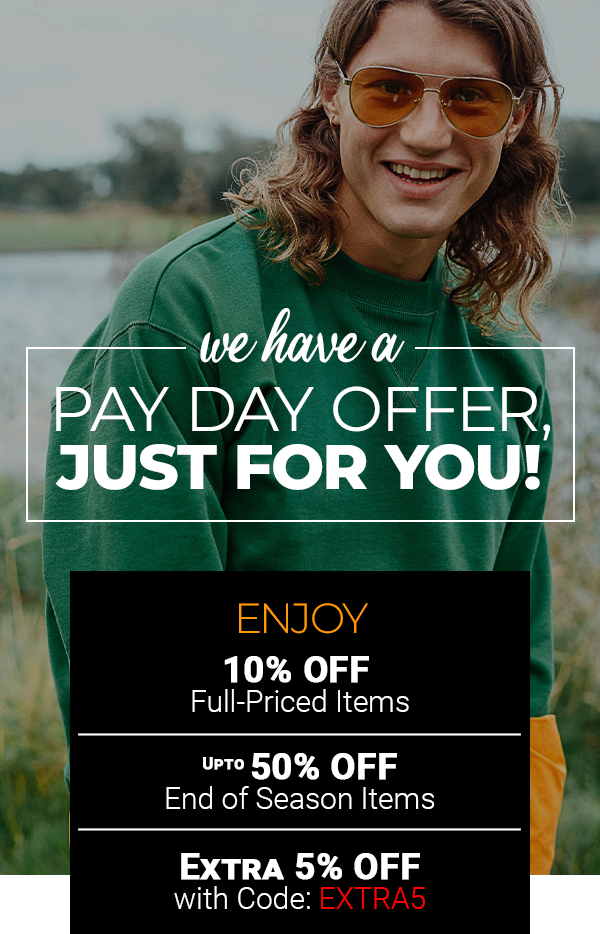
<style>
.page{position:relative;width:600px;height:934px;background:#000000}
.page>*{position:absolute;margin:0}
.t1{font:30px/30px "Roboto-Light";color:#ffffff}
.t2{font:36px/30px "Roboto-Bold";color:#ffffff;font-variant:small-caps;font-weight:bold}
.t3{font:30px/30px "Roboto-Bold";color:#ffffff;font-variant:small-caps;font-weight:bold}
.t4{font:30px/30px "Roboto-Light";color:#ff0000}
</style>
<div class="page">
<p class="t1" style="left:192px;top:656px;width:217px;height:56px;text-align:center"><span class="t2">10% OFF <br></span>Full-Priced Items</p>
<p class="t1" style="left:166px;top:753px;width:269px;height:56px;text-align:center"><span class="t3">Upto </span><span class="t2">50% OFF<br></span>End of Season Items</p>
<p class="t2" style="left:174px;top:853px;width:251px;height:56px;text-align:center">Extra 5% OFF<br><span class="t1">with Code: </span><span class="t4">EXTRA5</span></p>
</div>
